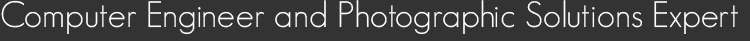
<style>
.page{position:relative;width:750px;height:41px;background:#333333}
.page>*{position:absolute;margin:0}
.t1{font:36px "GeosansLight";color:#ffffff}
</style>
<div class="page">
<p class="t1" style="left:1px;top:0px;width:737px;height:35px">Computer Engineer and Photographic Solutions Expert</p>
</div>
